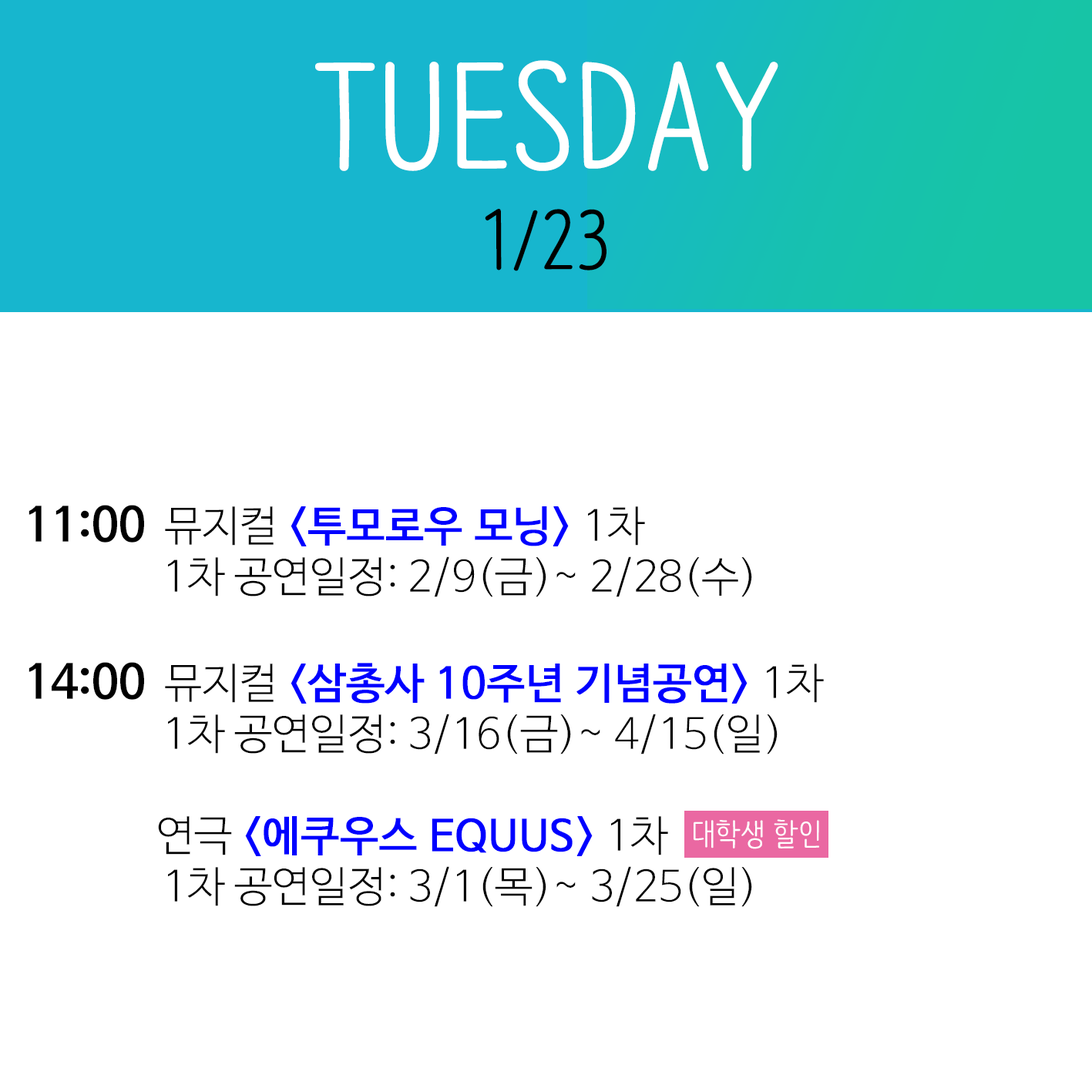
<style>
.page{position:relative;width:1092px;height:1092px;background:#ffffff}
.page>*{position:absolute;margin:0}
.t1{font:138.7px "NanumBarunpenOTF";color:#ffffff}
.t2{font:77.1px "NanumBarunpenOTF";color:#000000}
.t3{font:42.4px "NanumBarunGothicOTFLight";color:#000000}
.t4{font:46.2px "NanumBarunGothicBold";color:#000000}
.t5{font:42.4px "NanumBarunGothic";color:#0000ff;font-weight:bold}
</style>
<div class="page">
<p class="t1" style="left:315px;top:60px;width:463px;height:111px">TUESDAY</p>
<p class="t2" style="left:485px;top:209px;width:121px;height:62px">1/23</p>
<p class="t3" style="left:29px;top:505px;width:795px;height:402px"><span class="t4">11:00</span>  뮤지컬 <span class="t5">&lt;투모로우 모닝&gt; </span>1차<br>     1차 공연일정: 2/9(금)~ 2/28(수)<br><br><span class="t4">14:00</span>  뮤지컬 <span class="t5">&lt;삼총사 10주년 기념공연&gt; </span>1차<br>     1차 공연일정: 3/16(금)~ 4/15(일)<br><br>              연극 <span class="t5">&lt;에쿠우스 EQUUS&gt; </span>1차<br>     1차 공연일정: 3/1(목)~ 3/25(일)</p>
</div>
